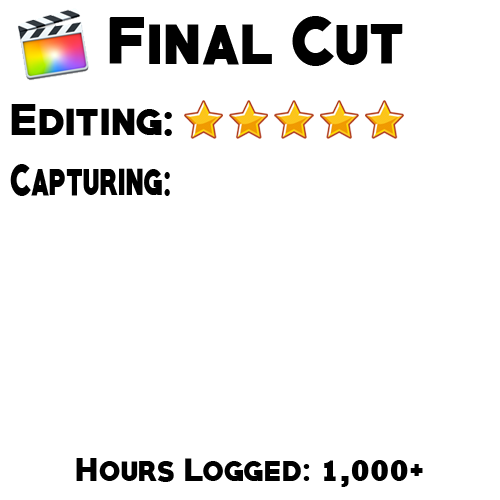
<style>
.page{position:relative;width:500px;height:500px;background:#ffffff}
.page>*{position:absolute;margin:0}
.t1{font:60px "PRIMETIME-Regular";color:#000000;scale:0.94 1}
.t2{font:40px "PRIMETIME-Regular";color:#000000;scale:0.94 1}
.t3{font:40px "PRIMETIME-Regular";color:#000000;scale:0.68 1}
.t4{font:30px "PRIMETIME-Regular";color:#000000;scale:0.94 1}
.t5{font:30px "Rockwell-ExtraBold";color:#000000;scale:0.94 1}
</style>
<div class="page">
<p class="t1" style="left:109px;top:16px;width:294px;height:50px">Final Cut</p>
<p class="t2" style="left:11px;top:104px;width:161px;height:32px">Editing:</p>
<p class="t3" style="left:10px;top:164px;width:160px;height:32px">Capturing:</p>
<p class="t4" style="left:76px;top:458px;width:347px;height:29px">Hours Logged: <span class="t5">1,000</span>+</p>
</div>
